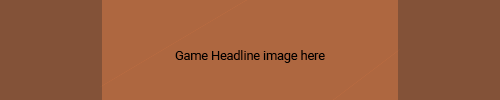
<style>
.page{position:relative;width:500px;height:100px;background:#ae6740}
.page>*{position:absolute;margin:0}
.t1{font:12.5px "Roboto-Regular";color:#000000}
</style>
<div class="page">
<p class="t1" style="left:175px;top:50px;width:150px;height:13px">Game Headline image here</p>
</div>
